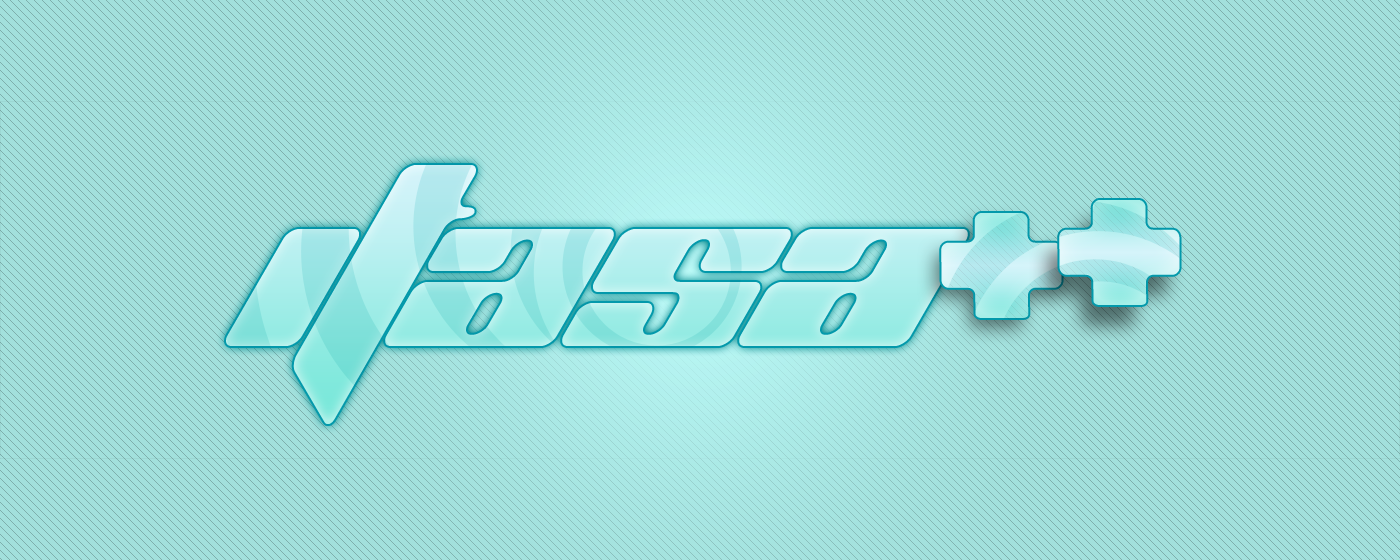
<style>
.page{position:relative;width:1400px;height:560px;background:#a2e0dc}
.page>*{position:absolute;margin:0}
.t1{font:222.1px "PlanetKosmos";letter-spacing:-0.025em}
.t2{font:180.7px "PlanetKosmos";scale:0.86 1}
</style>
<div class="page">
<p class="t1" style="left:226px;top:165px;width:742px;height:259px">itasa</p>
<p class="t2" style="left:1059px;top:200px;width:121px;height:105px">+</p>
<p class="t2" style="left:941px;top:213px;width:121px;height:105px">+</p>
</div>
